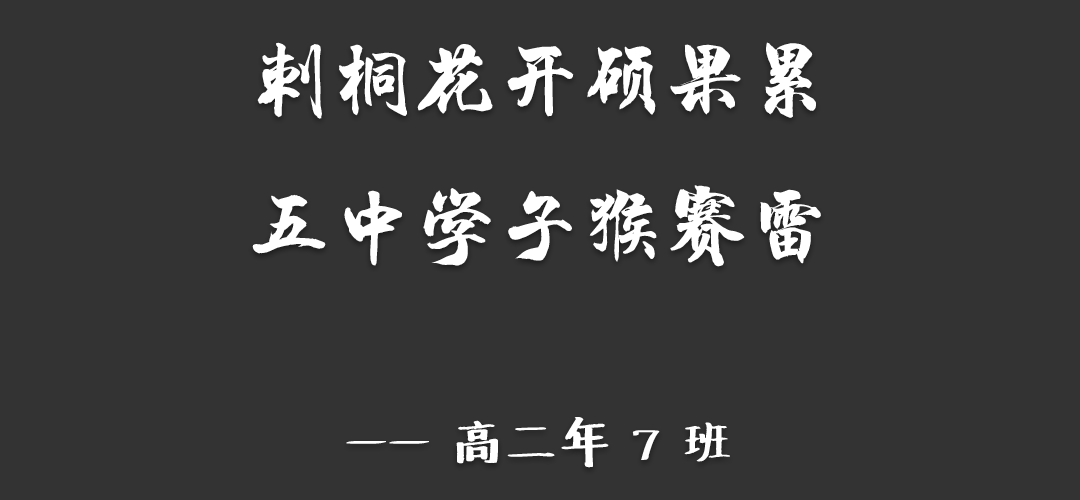
<style>
.page{position:relative;width:1080px;height:500px;background:#333333}
.page>*{position:absolute;margin:0}
.t1{font:83.3px "HYChengXingJ";color:#ffffff}
.t2{font:50px "Undefined";color:#ffffff}
</style>
<div class="page">
<p class="t1" style="left:252px;top:42px;width:569px;height:426px;text-align:center">刺桐花开硕果累<br>五中学子猴赛雷<br><span class="t2"><br>—— 高二年 7 班</span></p>
</div>
